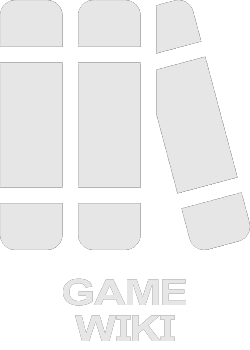
<style>
.page{position:relative;width:250px;height:350px;background:#ffffff}
.page>*{position:absolute;margin:0}
.t1{font:36px/36px "Arial-BoldMT";letter-spacing:-0.075em;color:#e6e6e6;text-transform:uppercase;scale:1.23 1}
</style>
<div class="page">
<p class="t1" style="left:63px;top:278px;width:123px;height:63px;text-align:center">Game<br>Wiki</p>
<p class="t1" style="left:63px;top:278px;width:123px;height:63px;text-align:center">Game<br>Wiki</p>
</div>
